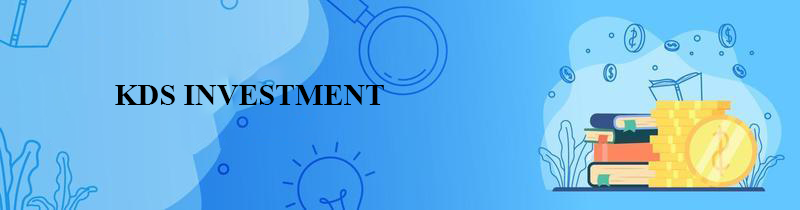
<style>
.page{position:relative;width:800px;height:210px}
.page>*{position:absolute;margin:0}
.t1{font:30px "TimesNewRomanPS-BoldMT";color:#000000}
</style>
<div class="page">
<p class="t1" style="left:115px;top:85px;width:269px;height:20px">KDS INVESTMENT</p>
</div>
